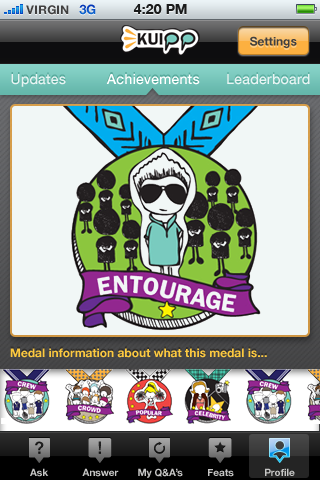
<style>
.page{position:relative;width:320px;height:480px;background:#f1f7f6}
.page>*{position:absolute;margin:0}
.t1{font:12px "HelveticaNeue-Bold";color:#404040;text-transform:uppercase}
.t2{font:13px "HelveticaNeue-Bold";color:#0c54c5;text-transform:uppercase}
.t3{font:14px "HelveticaNeue-Bold";color:#1a1b1b;text-transform:uppercase}
.t4{font:12px "HelveticaNeue-Bold";color:#404041}
.t5{font:14px "HelveticaNeue-Medium";letter-spacing:0.01em;color:#e9f4f3}
.t6{font:14px "HelveticaNeue-Medium";letter-spacing:0.01em;color:#ffffff}
.t7{font:12px "HelveticaNeue-Bold";color:#fcc940}
.t8{font:10px "HelveticaNeue-Bold";color:#c6c6c5}
</style>
<div class="page">
<p class="t1" style="left:26px;top:5px;width:43px;height:10px">VIRGIN</p>
<p class="t2" style="left:79px;top:4px;width:17px;height:11px">3G</p>
<p class="t3" style="left:133px;top:4px;width:54px;height:10px">4:20 PM</p>
<p class="t4" style="left:250px;top:36px;width:47px;height:12px">Settings</p>
<p class="t5" style="left:11px;top:74px;width:55px;height:13px">Updates</p>
<p class="t6" style="left:106px;top:74px;width:94px;height:11px">Achievements</p>
<p class="t5" style="left:227px;top:74px;width:83px;height:11px">Leaderboard</p>
<p class="t7" style="left:10px;top:348px;width:257px;height:10px">Medal information about what this medal is...</p>
<p class="t8" style="left:30px;top:468px;width:19px;height:9px">Ask</p>
<p class="t8" style="left:82px;top:468px;width:37px;height:9px">Answer</p>
<p class="t8" style="left:138px;top:468px;width:45px;height:10px">My Q&amp;A’s</p>
<p class="t8" style="left:208px;top:469px;width:26px;height:8px">Feats</p>
<p class="t8" style="left:265px;top:468px;width:30px;height:8px">Profile</p>
</div>
